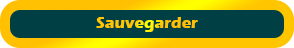
<style>
.page{position:relative;width:294px;height:48px;background:#004044}
.page>*{position:absolute;margin:0}
.t1{font:16px "ErasITC-Bold";color:#ffc600}
</style>
<div class="page">
<p class="t1" style="left:96px;top:17px;width:102px;height:15px">Sauvegarder</p>
</div>
